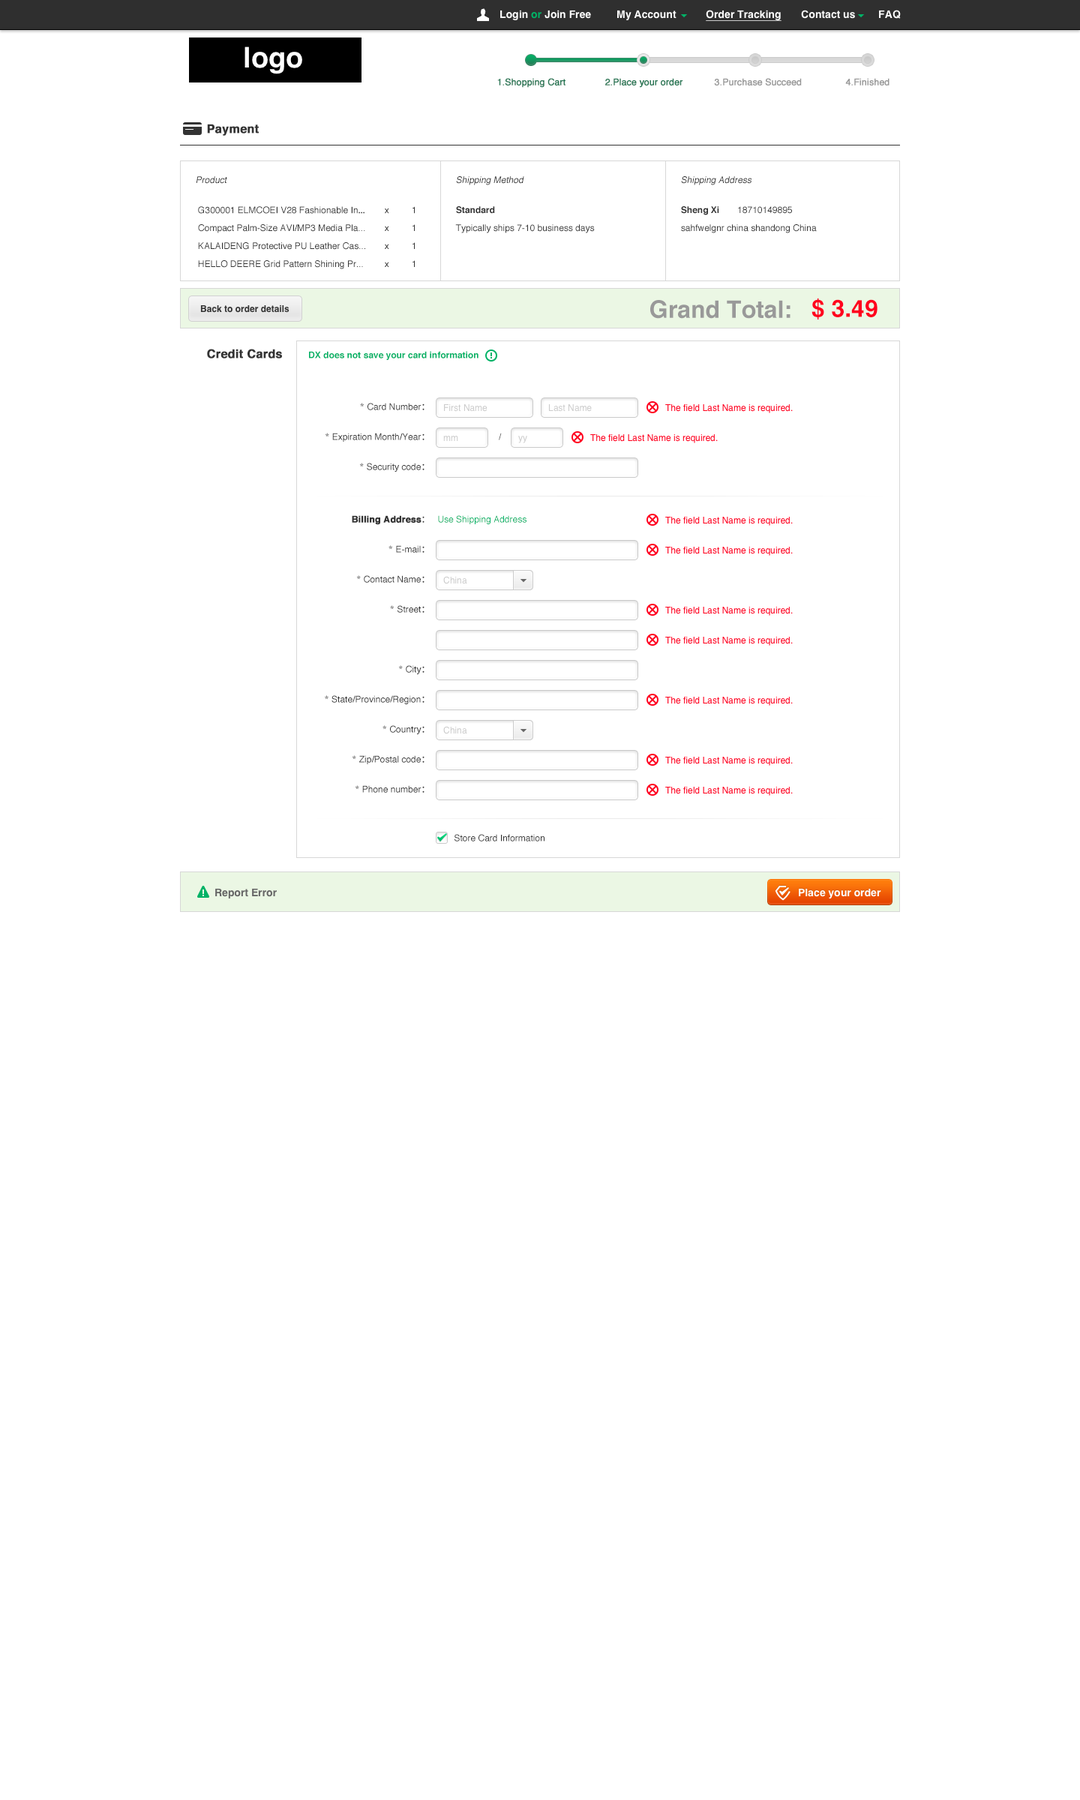
<style>
.page{position:relative;width:1080px;height:1800px;background:#ffffff}
.page>*{position:absolute;margin:0}
.t1{font:10.5px "Helvetica-Bold";color:#ffffff}
.t2{font:10.5px "Helvetica-Bold";color:#00b266}
.t3{font:10.5px "Helvetica-Bold";color:#ffffff;text-decoration:underline}
.t4{font:28.5px "Helvetica-Bold";color:#ffffff}
.t5{font:9px "Helvetica";color:#287755;font-weight:bold}
.t6{font:9px "Helvetica";color:#999999;font-weight:bold}
.t7{font:12px "Helvetica-Bold";color:#333333;font-weight:bold}
.t8{font:9px/18px "Helvetica";color:#333333}
.t9{font:9px/30px "Helvetica";color:#333333;font-style:italic}
.t10{font:9px/18px "AdobeHeitiStd-Regular";color:#333333}
.t11{font:9px/18px "Helvetica-Bold";color:#333333}
.t12{font:9px "Helvetica-Bold";color:#333333}
.t13{font:24px "Helvetica-Bold";color:#999999}
.t14{font:24px "Helvetica-Bold";color:#ff001e}
.t15{font:9px "Helvetica-Bold";color:#00b266}
.t16{font:9px "Helvetica";color:#333333}
.t17{font:9px "Century";color:#333333}
.t18{font:9px "AdobeHeitiStd-Regular";color:#333333}
.t19{font:9px "Helvetica";color:#cccccc}
.t20{font:9px "Helvetica";color:#ff001e}
.t21{font:9px "Century"}
.t22{font:9px "Helvetica-Bold";color:#333333;font-weight:bold}
.t23{font:9px "Helvetica";color:#00b266}
.t24{font:10.5px "Helvetica-Bold";color:#666666}
</style>
<div class="page">
<p class="t1" style="left:500px;top:10px;width:91px;height:10px">Login <span class="t2">or </span>Join Free</p>
<p class="t1" style="left:617px;top:10px;width:59px;height:10px">My Account</p>
<p class="t3" style="left:706px;top:10px;width:76px;height:11px">Order Tracking</p>
<p class="t1" style="left:801px;top:10px;width:54px;height:9px">Contact us</p>
<p class="t1" style="left:879px;top:10px;width:22px;height:9px">FAQ</p>
<p class="t4" style="left:244px;top:46px;width:58px;height:28px">logo</p>
<p class="t5" style="left:497px;top:78px;width:69px;height:10px">1.Shopping Cart</p>
<p class="t5" style="left:605px;top:78px;width:78px;height:10px">2.Place your order</p>
<p class="t6" style="left:714px;top:78px;width:88px;height:8px">3.Purchase Succeed</p>
<p class="t6" style="left:845px;top:78px;width:45px;height:8px">4.Finished</p>
<p class="t7" style="left:207px;top:124px;width:52px;height:12px">Payment</p>
<p class="t8" style="left:196px;top:176px;width:219px;height:93px"><span class="t9">Product<br></span> G300001 ELMCOEI V28 Fashionable In<span class="t10">... </span>x  1<br> Compact Palm-Size AVI/MP3 Media Pla... x  1<br> KALAIDENG Protective PU Leather Cas... x  1<br> HELLO DEERE Grid Pattern Shining Pr... x 1</p>
<p class="t8" style="left:455px;top:176px;width:140px;height:57px"><span class="t9">Shipping Method<br></span><span class="t11">Standard<br></span>Typically ships 7-10 business days</p>
<p class="t8" style="left:681px;top:176px;width:136px;height:57px"><span class="t9">Shipping Address<br></span><span class="t11">Sheng Xi    </span> 18710149895<br>sahfwelgnr china shandong China</p>
<p class="t12" style="left:200px;top:304px;width:90px;height:9px">Back to order details</p>
<p class="t13" style="left:650px;top:300px;width:140px;height:19px">Grand Total:</p>
<p class="t14" style="left:812px;top:298px;width:66px;height:22px">$ 3.49</p>
<p class="t7" style="left:207px;top:349px;width:75px;height:9px">Credit Cards</p>
<p class="t15" style="left:309px;top:351px;width:169px;height:9px">DX does not save your card information</p>
<p class="t16" style="left:360px;top:403px;width:64px;height:7px"><span class="t17">*</span> Card Number<span class="t18">：</span></p>
<p class="t19" style="left:444px;top:404px;width:44px;height:8px">First Name</p>
<p class="t19" style="left:548px;top:404px;width:44px;height:8px">Last Name</p>
<p class="t20" style="left:665px;top:404px;width:128px;height:9px">The field Last Name is required.</p>
<p class="t16" style="left:326px;top:433px;width:98px;height:9px"><span class="t17">*</span> Expiration Month/Year<span class="t18">：</span></p>
<p class="t19" style="left:443px;top:436px;width:15px;height:5px">mm</p>
<p class="t21" style="left:499px;top:433px;width:3px;height:7px">/</p>
<p class="t19" style="left:518px;top:436px;width:9px;height:7px">yy</p>
<p class="t20" style="left:590px;top:434px;width:128px;height:9px">The field Last Name is required.</p>
<p class="t16" style="left:360px;top:463px;width:64px;height:9px"><span class="t17">*</span> Security code<span class="t18">：</span></p>
<p class="t22" style="left:352px;top:515px;width:72px;height:10px">Billing Address<span class="t18">：</span></p>
<p class="t23" style="left:438px;top:515px;width:88px;height:9px">Use Shipping Address</p>
<p class="t20" style="left:665px;top:516px;width:128px;height:10px">The field Last Name is required.</p>
<p class="t16" style="left:388px;top:545px;width:36px;height:8px"><span class="t17">*</span> E-mail<span class="t18">：</span></p>
<p class="t20" style="left:665px;top:546px;width:128px;height:10px">The field Last Name is required.</p>
<p class="t16" style="left:357px;top:575px;width:67px;height:8px"><span class="t17">*</span> Contact Name<span class="t18">：</span></p>
<p class="t19" style="left:443px;top:576px;width:24px;height:8px">China</p>
<p class="t16" style="left:390px;top:605px;width:34px;height:8px"><span class="t17">*</span> Street<span class="t18">：</span></p>
<p class="t20" style="left:665px;top:606px;width:128px;height:10px">The field Last Name is required.</p>
<p class="t20" style="left:665px;top:636px;width:128px;height:10px">The field Last Name is required.</p>
<p class="t16" style="left:399px;top:665px;width:25px;height:9px"><span class="t17">*</span> City<span class="t18">：</span></p>
<p class="t16" style="left:325px;top:695px;width:99px;height:9px"><span class="t17">*</span> State/Province/Region<span class="t18">：</span></p>
<p class="t20" style="left:665px;top:696px;width:128px;height:10px">The field Last Name is required.</p>
<p class="t16" style="left:382px;top:725px;width:42px;height:9px"><span class="t17">*</span> Country<span class="t18">：</span></p>
<p class="t19" style="left:443px;top:726px;width:24px;height:8px">China</p>
<p class="t16" style="left:352px;top:755px;width:72px;height:9px"><span class="t17">*</span> Zip/Postal code<span class="t18">：</span></p>
<p class="t20" style="left:665px;top:756px;width:128px;height:10px">The field Last Name is required.</p>
<p class="t16" style="left:356px;top:785px;width:68px;height:8px"><span class="t17">*</span> Phone number<span class="t18">：</span></p>
<p class="t20" style="left:665px;top:786px;width:128px;height:10px">The field Last Name is required.</p>
<p class="t16" style="left:454px;top:834px;width:90px;height:8px">Store Card Information</p>
<p class="t24" style="left:215px;top:888px;width:62px;height:10px">Report Error</p>
<p class="t1" style="left:799px;top:888px;width:82px;height:10px">Place your order</p>
</div>
